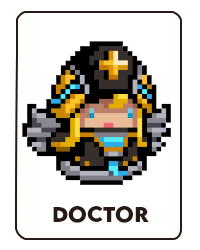
<style>
.page{position:relative;width:200px;height:250px;background:#ffffff}
.page>*{position:absolute;margin:0}
.t1{font:18.6px "LEMONMILK-Bold";color:#271a15;scale:1.1 1}
</style>
<div class="page">
<p class="t1" style="left:53px;top:206px;width:96px;height:17px">DOCTOR</p>
</div>
